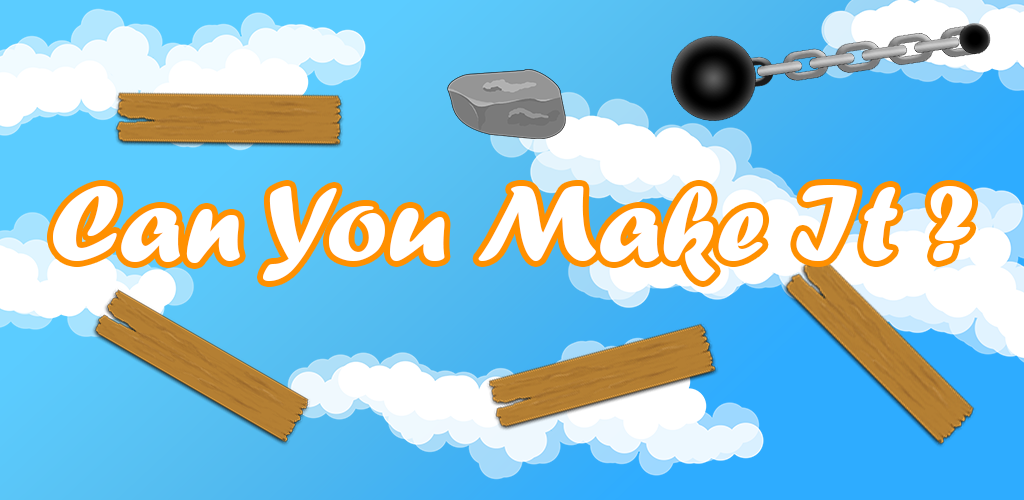
<style>
.page{position:relative;width:1024px;height:500px}
.page>*{position:absolute;margin:0}
.t1{font:112.5px "ForteMT";color:#ffffff}
</style>
<div class="page">
<p class="t1" style="left:53px;top:185px;width:919px;height:96px">Can You Make It ?</p>
</div>
